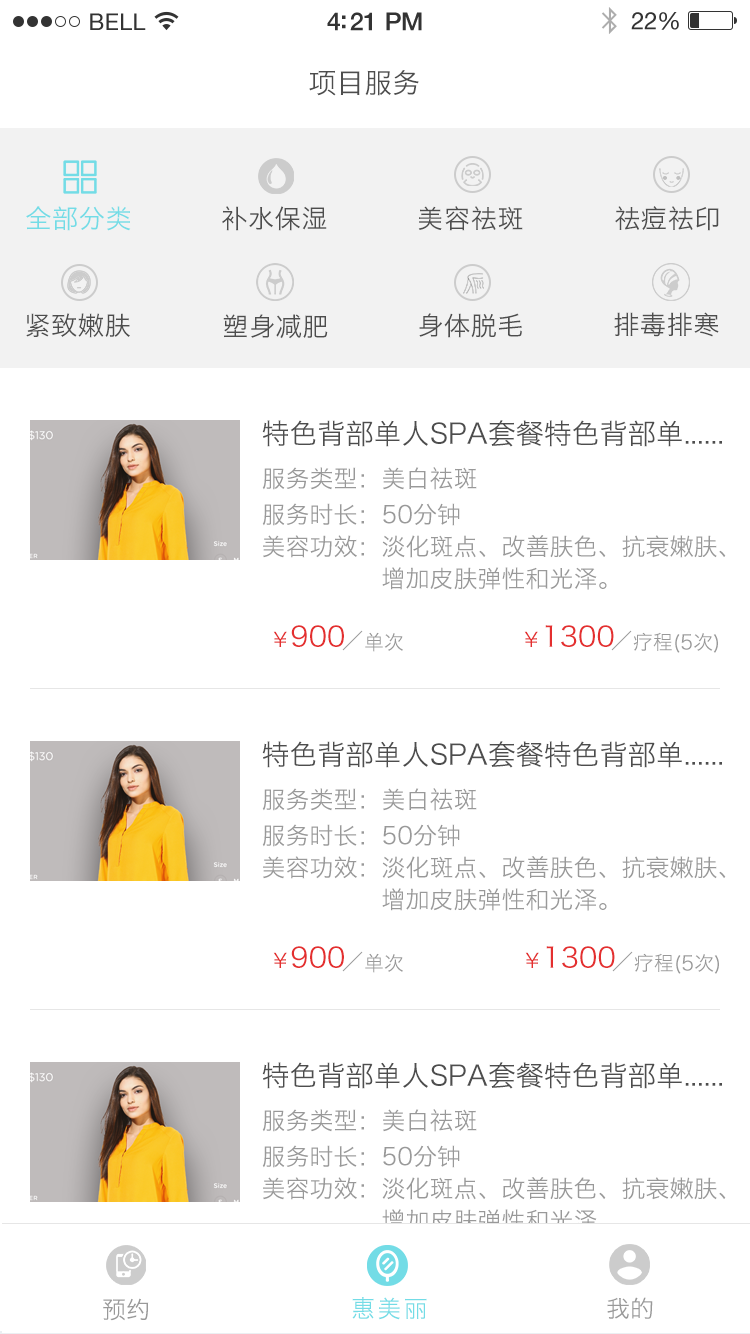
<style>
.page{position:relative;width:750px;height:1334px;background:#ffffff}
.page>*{position:absolute;margin:0}
.t1{font:28px "HiraginoSansGB-W3";color:#4d4d4d}
.t2{font:26px "HiraginoSansGB-W3";letter-spacing:0.03em;color:#73dce6}
.t3{font:26px "HiraginoSansGB-W3";letter-spacing:0.03em;color:#4d4d4d}
.t4{font:24px/32px "HiraginoSansGB-W3";color:#999999}
.t5{font:24px/36px "HiraginoSansGB-W3";color:#999999}
.t6{font:28px "HiraginoSansGB-W3";color:#e42f2f}
.t7{font:20px "HiraginoSansGB-W3";color:#999999}
.t8{font:20px "HiraginoSansGB-W3";color:#e42f2f}
.t9{font:24px "HiraginoSansGB-W3";color:#999999}
.t10{font:24px "HiraginoSansGB-W3";letter-spacing:0.1em;color:#73dce6}
</style>
<div class="page">
<p class="t1" style="left:309px;top:70px;width:110px;height:26px">项目服务</p>
<p class="t2" style="left:26px;top:206px;width:105px;height:25px">全部分类</p>
<p class="t3" style="left:222px;top:206px;width:105px;height:25px">补水保湿</p>
<p class="t3" style="left:418px;top:206px;width:105px;height:25px">美容祛斑</p>
<p class="t3" style="left:615px;top:206px;width:104px;height:25px">祛痘祛印</p>
<p class="t3" style="left:26px;top:313px;width:104px;height:25px">紧致嫩肤</p>
<p class="t3" style="left:223px;top:314px;width:105px;height:25px">塑身减肥</p>
<p class="t3" style="left:419px;top:313px;width:103px;height:25px">身体脱毛</p>
<p class="t3" style="left:614px;top:312px;width:105px;height:25px">排毒排寒</p>
<p class="t1" style="left:262px;top:420px;width:460px;height:27px">特色背部单人SPA套餐特色背部单......</p>
<p class="t4" style="left:262px;top:467px;width:464px;height:123px;text-align:justify"><span class="t5">服务类型：美白祛斑<br>服务时长：50分钟<br></span>美容功效：淡化斑点、改善肤色、抗衰嫩肤、<br>               增加皮肤弹性和光泽。</p>
<p class="t6" style="left:273px;top:625px;width:71px;height:22px"><span class="t7">                                        </span><span class="t8">￥</span>900</p>
<p class="t6" style="left:524px;top:625px;width:90px;height:22px"><span class="t7">                                        </span><span class="t8">￥</span>1300</p>
<p class="t7" style="left:365px;top:632px;width:38px;height:20px">单次</p>
<p class="t7" style="left:633px;top:632px;width:85px;height:21px">疗程(5次)</p>
<p class="t1" style="left:262px;top:741px;width:460px;height:27px">特色背部单人SPA套餐特色背部单......</p>
<p class="t4" style="left:262px;top:788px;width:464px;height:123px;text-align:justify"><span class="t5">服务类型：美白祛斑<br>服务时长：50分钟<br></span>美容功效：淡化斑点、改善肤色、抗衰嫩肤、<br>               增加皮肤弹性和光泽。</p>
<p class="t6" style="left:273px;top:946px;width:71px;height:22px"><span class="t7">                                        </span><span class="t8">￥</span>900</p>
<p class="t7" style="left:365px;top:953px;width:38px;height:20px">单次</p>
<p class="t6" style="left:525px;top:946px;width:90px;height:22px"><span class="t7">                                        </span><span class="t8">￥</span>1300</p>
<p class="t7" style="left:634px;top:953px;width:85px;height:21px">疗程(5次)</p>
<p class="t1" style="left:262px;top:1062px;width:460px;height:27px">特色背部单人SPA套餐特色背部单......</p>
<p class="t4" style="left:262px;top:1109px;width:464px;height:123px;text-align:justify"><span class="t5">服务类型：美白祛斑<br>服务时长：50分钟<br></span>美容功效：淡化斑点、改善肤色、抗衰嫩肤、<br>               增加皮肤弹性和光泽。</p>
<p class="t9" style="left:103px;top:1298px;width:46px;height:23px">预约</p>
<p class="t10" style="left:352px;top:1297px;width:75px;height:23px">惠美丽</p>
<p class="t9" style="left:607px;top:1297px;width:46px;height:22px">我的</p>
</div>
